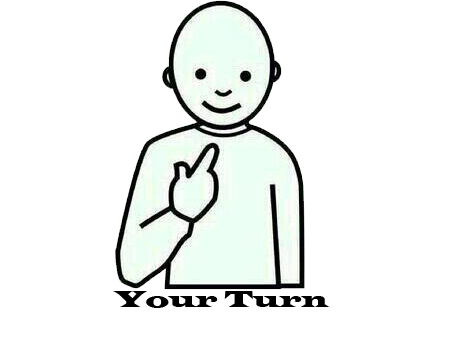
<style>
.page{position:relative;width:454px;height:340px;background:#ffffff}
.page>*{position:absolute;margin:0}
.t1{font:24px "LatinWide";color:#000000}
</style>
<div class="page">
<p class="t1" style="left:113px;top:291px;width:217px;height:17px">Your Turn</p>
</div>
